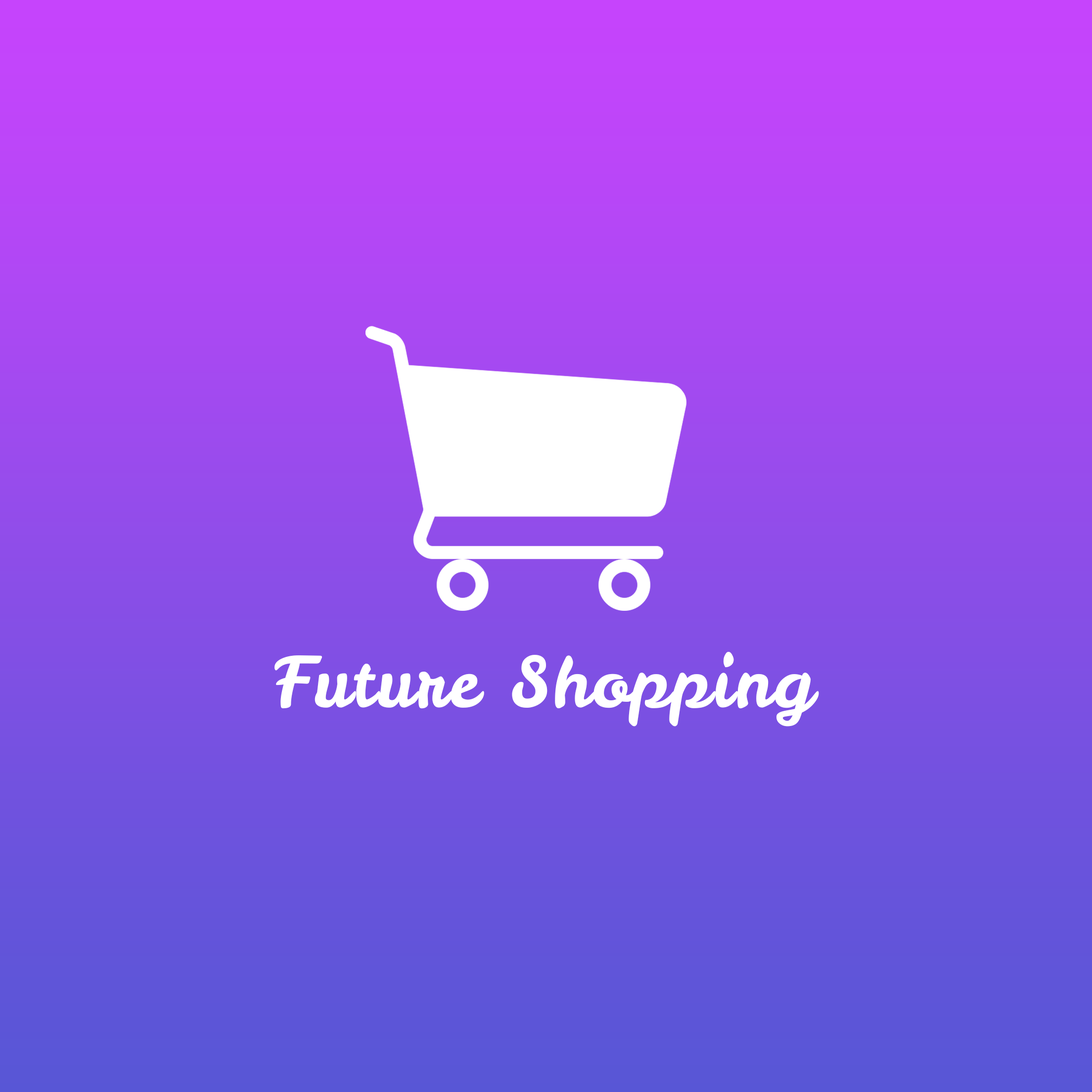
<style>
.page{position:relative;width:1092px;height:1092px}
.page>*{position:absolute;margin:0}
.t1{font:69.2px "LeckerliOne-Regular";letter-spacing:0.03em;color:#ffffff}
</style>
<div class="page">
<p class="t1" style="left:274px;top:652px;width:545px;height:75px">Future Shopping</p>
</div>
